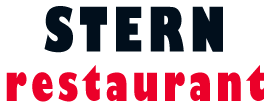
<style>
.page{position:relative;width:270px;height:105px;background:#ffffff}
.page>*{position:absolute;margin:0}
.t1{font:48px/60px "GillSans-UltraBoldCondensed";letter-spacing:0.09em;color:#eb0029}
.t2{font:60px/60px "GillSans-UltraBoldCondensed";letter-spacing:0.09em;color:#010f1c}
</style>
<div class="page">
<p class="t1" style="left:6px;top:6px;width:258px;height:96px;text-align:center"><span class="t2">STERN<br></span>restaurant</p>
</div>
